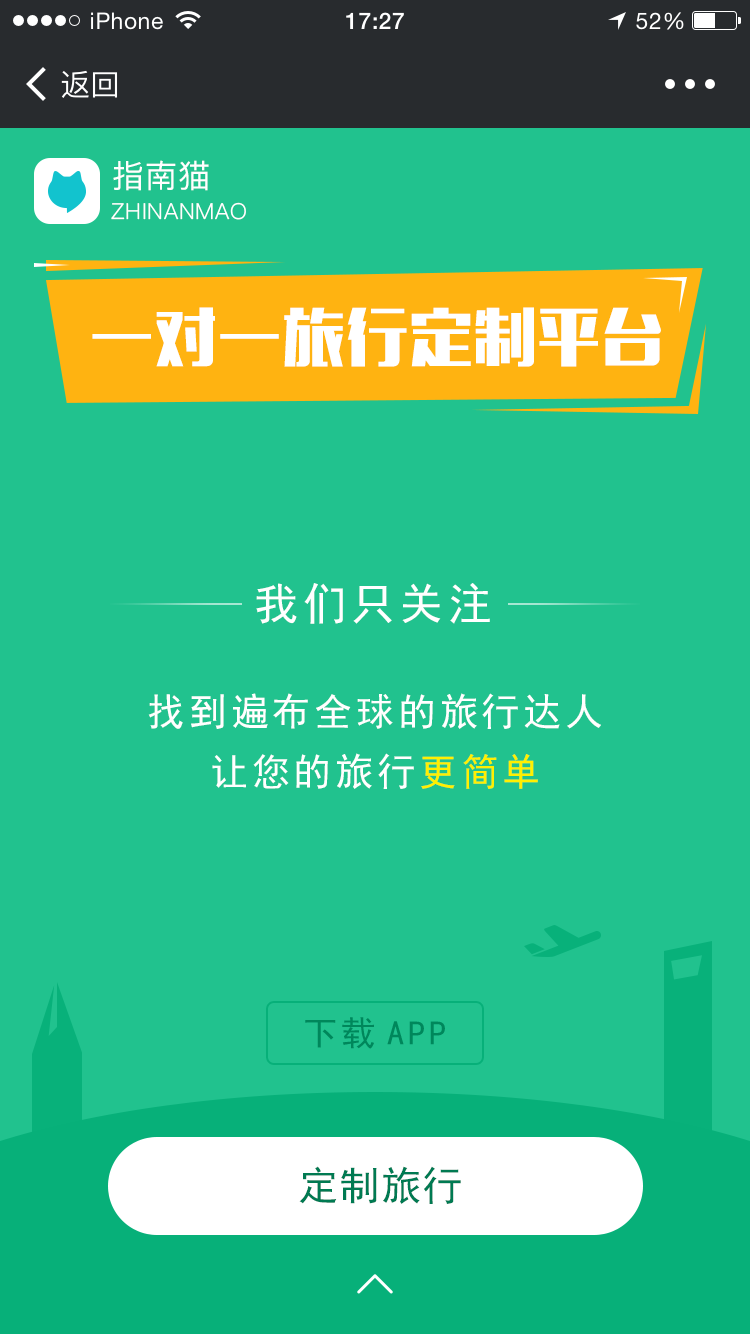
<style>
.page{position:relative;width:750px;height:1334px;background:#21c28e}
.page>*{position:absolute;margin:0}
.t1{font:32px "PingFangSC-Regular";letter-spacing:0.032em;color:#ffffff}
.t2{font:22px "PingFangSC-Light";letter-spacing:0.032em;color:#ffffff}
.t3{font:62px "MFLiHei_Noncommercial-Regular";letter-spacing:0.03em;color:#ffffff}
.t4{font:44px "SimHei";letter-spacing:0.1em;color:#ffffff}
.t5{font:38px/60px "SimHei";letter-spacing:0.1em;color:#ffffff}
.t6{font:38px/60px "SimHei";letter-spacing:0.1em;color:#fff000}
.t7{font:34px "SimHei";letter-spacing:0.1em;color:#00875b}
.t8{font:40px "SimHei";letter-spacing:0.03em;color:#007a52}
</style>
<div class="page">
<p class="t1" style="left:113px;top:160px;width:96px;height:31px">指南猫</p>
<p class="t2" style="left:111px;top:202px;width:135px;height:18px">ZHINANMAO</p>
<p class="t3" style="left:92px;top:307px;width:569px;height:60px">一对一旅行定制平台</p>
<p class="t4" style="left:256px;top:583px;width:234px;height:41px">我们只关注</p>
<p class="t5" style="left:148px;top:693px;width:453px;height:96px;text-align:center">找到遍布全球的旅行达人<br>让您的旅行<span class="t6">更简单</span></p>
<p class="t7" style="left:305px;top:1017px;width:140px;height:32px">下载APP</p>
<p class="t8" style="left:299px;top:1166px;width:162px;height:38px">定制旅行</p>
</div>
